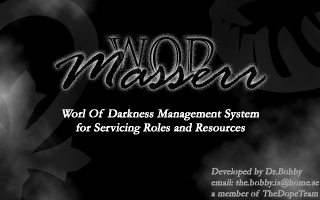
<style>
.page{position:relative;width:320px;height:200px;background:#000000}
.page>*{position:absolute;margin:0}
.t1{font:72px "RageItalic";color:#000000}
.t2{font:12px "Garamond";color:#ffffff;font-weight:bold;font-style:italic}
.t3{font:9px "Garamond";color:#a9a7a7;font-weight:bold;font-style:italic}
</style>
<div class="page">
<p class="t1" style="left:56px;top:51px;width:210px;height:39px;opacity:0.71">Masserr</p>
<p class="t2" style="left:62px;top:109px;width:197px;height:26px;text-align:center">Worl Of Darkness Management System <br>for Servicing Roles and Resources</p>
<p class="t3" style="left:211px;top:168px;width:109px;height:31px">Developed by Dr.Bobby<br>email: the.bobby.is@home.se <br>a member of TheDopeTeam</p>
</div>
